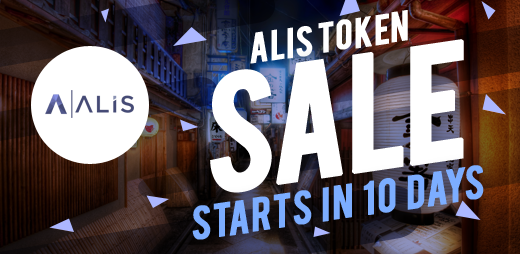
<style>
.page{position:relative;width:520px;height:254px;background:#ffffff}
.page>*{position:absolute;margin:0}
.t1{font:33px "Bebas";color:#ffffff;text-transform:uppercase;font-weight:bold}
.t2{font:130px "Bebas";letter-spacing:-0.04em;color:#ffffff;text-transform:uppercase;font-weight:bold}
.t3{font:37px "Bebas";color:#7badff;text-transform:uppercase;font-weight:bold}
</style>
<div class="page">
<p class="t1" style="left:250px;top:10px;width:158px;height:54px;rotate:-9deg">alis token</p>
<p class="t2" style="left:210px;top:39px;width:254px;height:154px;rotate:-8deg">Sale</p>
<p class="t3" style="left:192px;top:165px;width:292px;height:75px;rotate:-8deg">starts  in  10  days</p>
</div>
